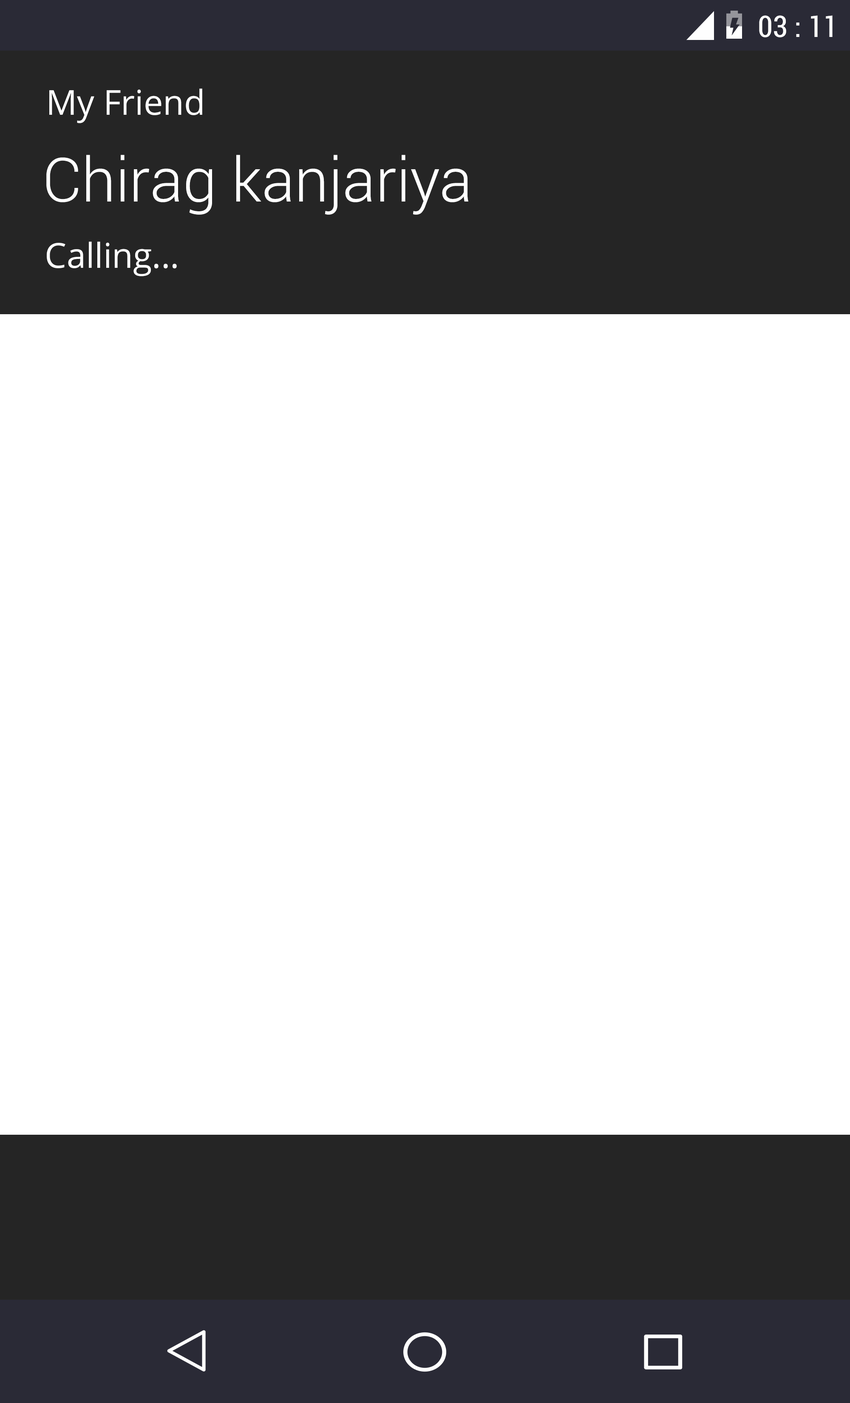
<style>
.page{position:relative;width:850px;height:1403px;background:#ffffff}
.page>*{position:absolute;margin:0}
.t1{font:30.9px "Roboto-Condensed";color:#ffffff}
.t2{font:34.4px "OpenSans";color:#ffffff}
.t3{font:61px "Roboto-Light";color:#ffffff}
</style>
<div class="page">
<p class="t1" style="left:759px;top:15px;width:74px;height:22px">03 : 11</p>
<p class="t2" style="left:49px;top:88px;width:153px;height:35px">My Friend</p>
<p class="t3" style="left:46px;top:155px;width:422px;height:60px">Chirag kanjariya</p>
<p class="t2" style="left:47px;top:241px;width:130px;height:35px">Calling...</p>
</div>
